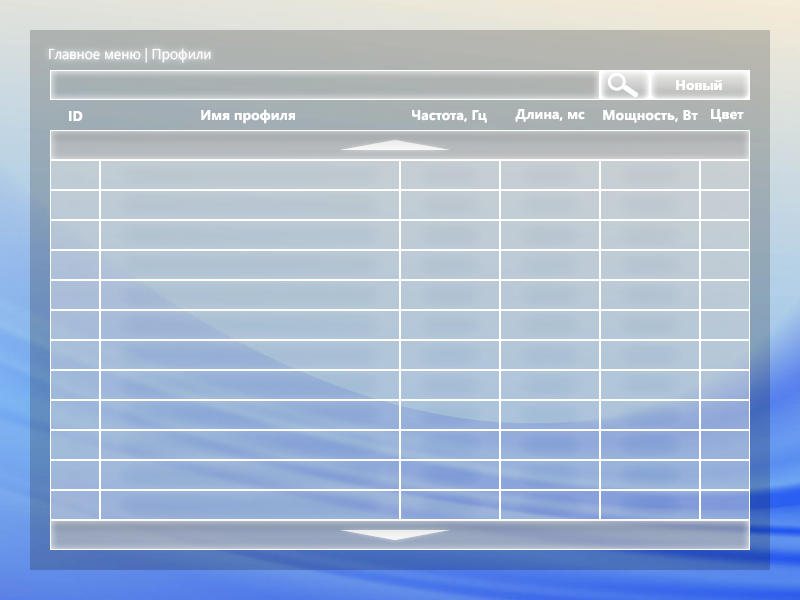
<style>
.page{position:relative;width:800px;height:600px}
.page>*{position:absolute;margin:0}
.t1{font:14.2px "SegoeUI";color:#ffffff}
.t2{font:14px "SegoeUI-Bold";color:#ffffff}
</style>
<div class="page">
<p class="t1" style="left:49px;top:47px;width:162px;height:16px">Главное меню | Профили</p>
<p class="t2" style="left:676px;top:80px;width:46px;height:10px">Новый</p>
<p class="t2" style="left:676px;top:80px;width:46px;height:10px">Новый</p>
<p class="t2" style="left:69px;top:111px;width:14px;height:10px">ID</p>
<p class="t2" style="left:201px;top:109px;width:94px;height:15px">Имя профиля</p>
<p class="t2" style="left:412px;top:110px;width:75px;height:13px">Частота, Гц</p>
<p class="t2" style="left:515px;top:109px;width:70px;height:13px">Длина, мс</p>
<p class="t2" style="left:603px;top:110px;width:95px;height:13px">Мощность, Вт</p>
<p class="t2" style="left:711px;top:109px;width:33px;height:13px">Цвет</p>
</div>
